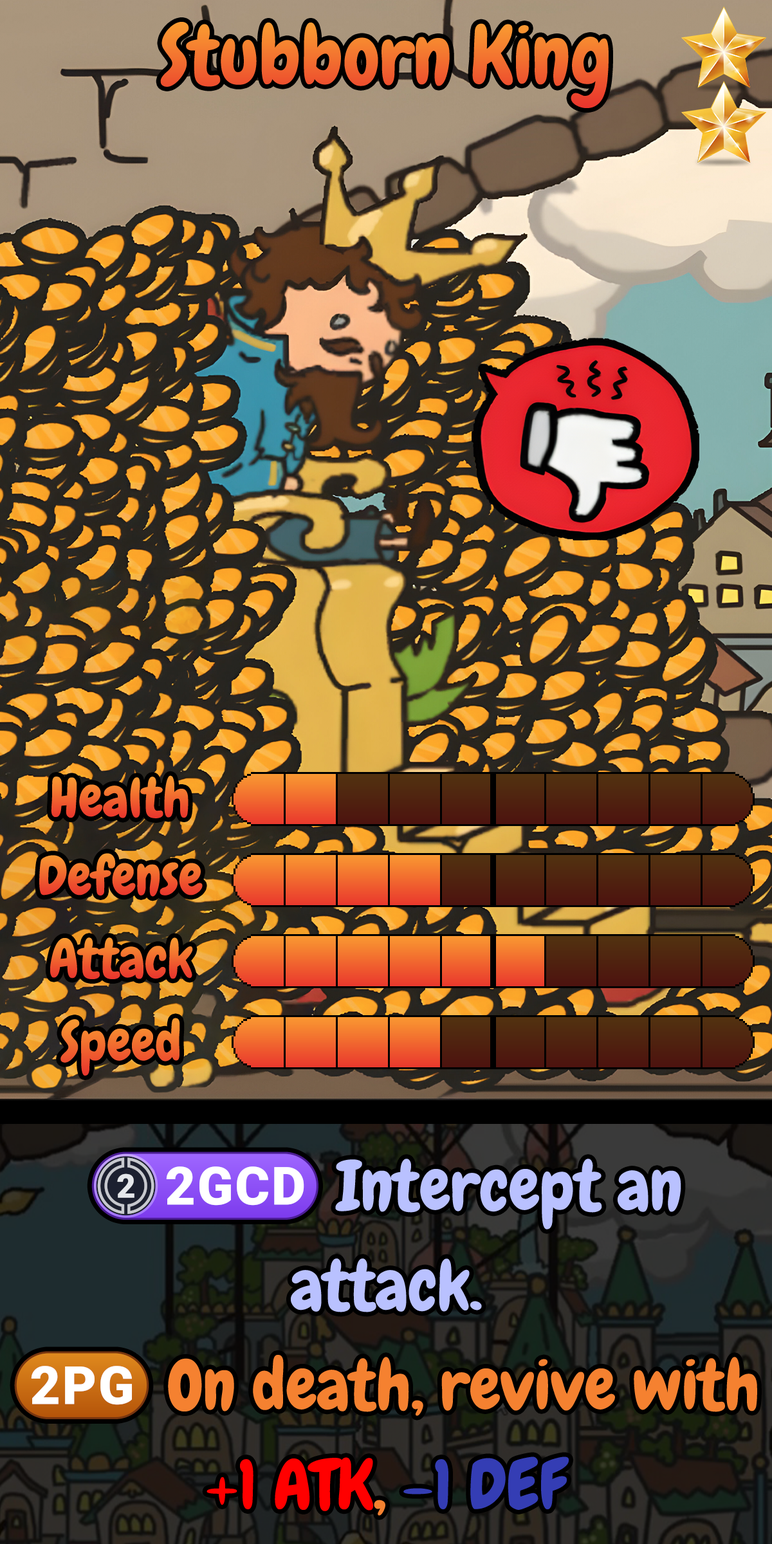
<style>
.page{position:relative;width:772px;height:1544px}
.page>*{position:absolute;margin:0}
.t1{font:139px "Chewy-Regular"}
.t2{font:92.7px "Chewy-Regular"}
.t3{font:119px/99.7px "Chewy-Regular";color:#f58130}
.t4{font:119px/99.7px "stoogedings-Regular";color:#b9c1ff}
.t5{font:119px/99.7px "Chewy-Regular";color:#b9c1ff}
.t6{font:119px/99.7px "stoogedings-Regular";color:#f58130}
.t7{font:119px/99.7px "Chewy-Regular";color:#ff0000}
.t8{font:119px/99.7px "Chewy-Regular";color:#343db4}
</style>
<div class="page">
<p class="t1" style="left:160px;top:22px;width:449px;height:86px">Stubborn King</p>
<p class="t2" style="left:51px;top:775px;width:138px;height:43px">Health</p>
<p class="t2" style="left:39px;top:853px;width:164px;height:44px">Defense</p>
<p class="t2" style="left:50px;top:938px;width:143px;height:41px">Attack</p>
<p class="t2" style="left:60px;top:1018px;width:120px;height:58px">Speed</p>
<p class="t3" style="left:14px;top:1152px;width:743px;height:364px;text-align:center"><span class="t4">(2GCD)</span><span class="t5"> Intercept an attack.<br></span><span class="t6">(2PG)</span> On death, revive with <span class="t7">+1 ATK</span>, <span class="t8">-1 DEF</span></p>
</div>
